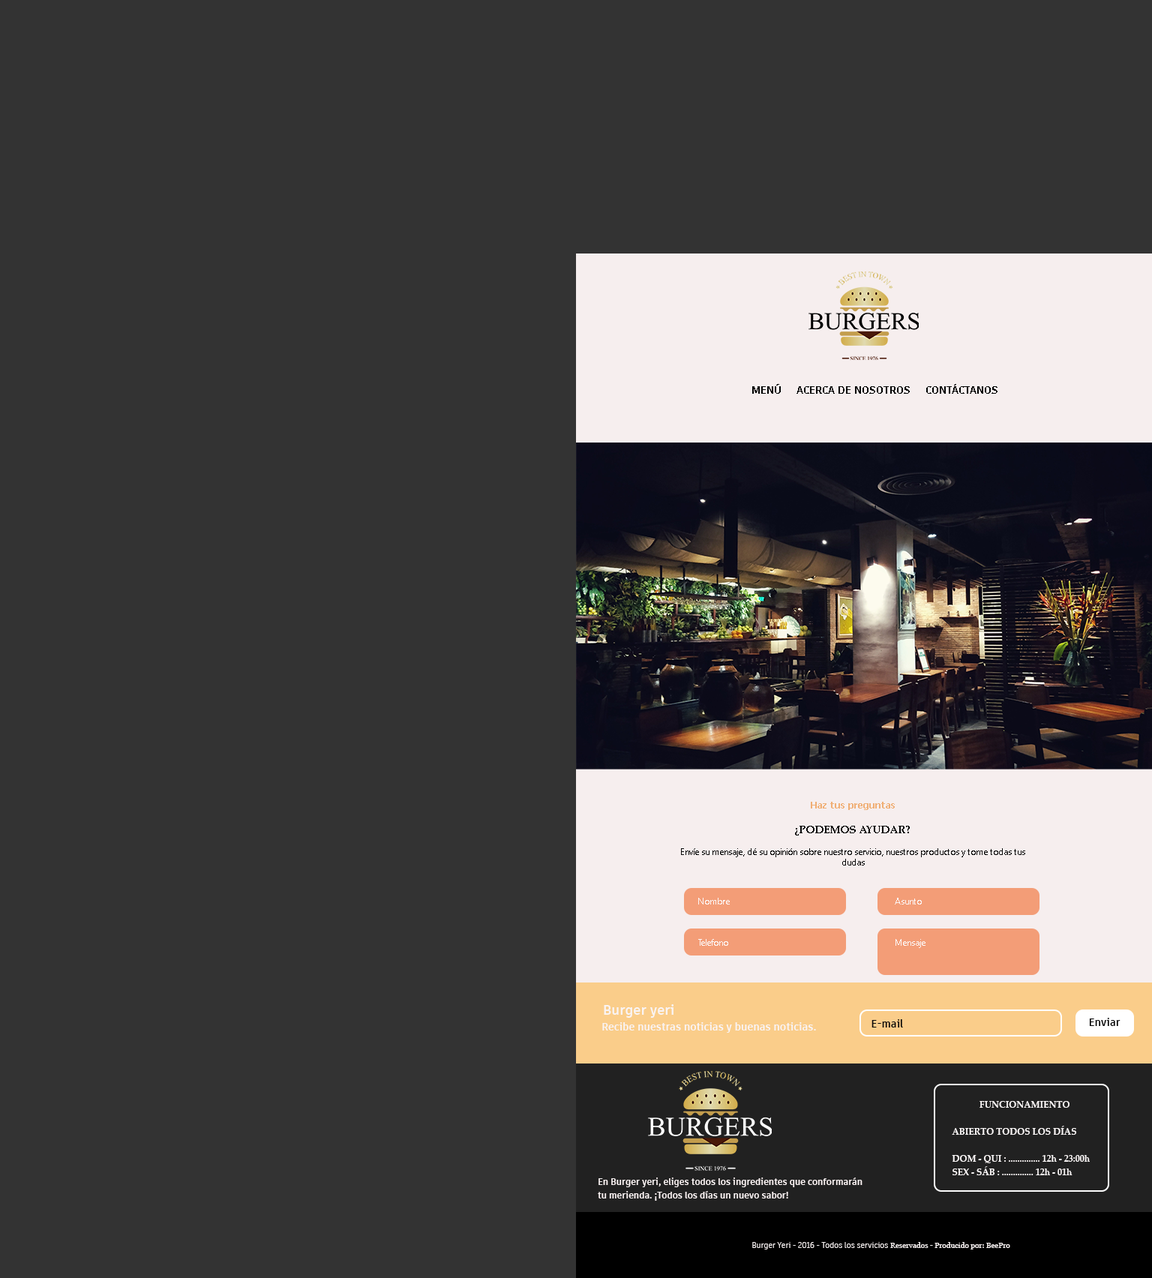
<style>
.page{position:relative;width:1152px;height:1278px;background:#333333}
.page>*{position:absolute;margin:0}
.t1{font:10.5px "ArtifaktElement-Bold";color:#000000}
.t2{font:9px "SegoeUI-Light";color:#090909}
.t3{font:9px "Tahoma-Bold";color:#f0af75}
.t4{font:10.5px "PalatinoLinotype-Bold";color:#050505}
.t5{font:9px "SegoeUI-Light";color:#fcf8f8}
.t6{font:13.5px "ArtifaktElement-Bold";color:#f9f4f4}
.t7{font:10.5px "ArtifaktElement-Bold";color:#f9f4f4}
.t8{font:10.5px "ArtifaktElement-Bold";color:#090909}
.t9{font:10.5px "ArtifaktElement-Bold";color:#050505}
.t10{font:9px/13.5px "PalatinoLinotype-Bold";color:#f9f5f5}
.t11{font:9px/13.5px "ArtifaktElement-Bold";color:#fcf4f4}
.t12{font:7.5px "ArtifaktElement-Regular";color:#f6f0f0}
.t13{font:7.5px "Georgia";color:#f6f0f0}
.t14{font:7.5px "Georgia";color:#f8f2f2}
</style>
<div class="page">
<p class="t1" style="left:752px;top:384px;width:246px;height:10px">MENÚ     ACERCA DE NOSOTROS     CONTÁCTANOS</p>
<p class="t2" style="left:681px;top:802px;width:344px;height:64px;text-align:center"><span class="t3">Haz tus preguntas<br><br></span><span class="t4">¿PODEMOS AYUDAR?<br><br></span>Envíe su mensaje, dé su opinión sobre nuestro servicio, nuestros productos y tome todas tus dudas</p>
<p class="t5" style="left:698px;top:898px;width:32px;height:6px">Nombre</p>
<p class="t5" style="left:895px;top:898px;width:27px;height:6px">Asunto</p>
<p class="t5" style="left:698px;top:939px;width:30px;height:7px">Telefono</p>
<p class="t5" style="left:896px;top:939px;width:30px;height:9px">Mensaje</p>
<p class="t6" style="left:604px;top:1004px;width:70px;height:14px">Burger yeri</p>
<p class="t7" style="left:602px;top:1022px;width:214px;height:11px">Recibe nuestras noticias y buenas noticias.</p>
<p class="t8" style="left:872px;top:1019px;width:31px;height:9px">E-mail</p>
<p class="t9" style="left:1089px;top:1018px;width:31px;height:8px">Enviar</p>
<p class="t10" style="left:952px;top:1101px;width:138px;height:74px;text-align:center">FUNCIONAMIENTO<br><br>ABIERTO TODOS LOS DÍAS<br><br>DOM - QUI : .............. 12h - 23:00h<br>SEX - SÁB : .............. 12h - 01h</p>
<p class="t11" style="left:598px;top:1178px;width:264px;height:23px">En Burger yeri, eliges todos los ingredientes que conformarán tu merienda. ¡Todos los días un nuevo sabor!</p>
<p class="t12" style="left:752px;top:1242px;width:258px;height:8px">Burger Yeri - 2016 - Todos los servicios <span class="t13">Reservados -</span><span class="t14"> Producido por: BeePro</span></p>
</div>
